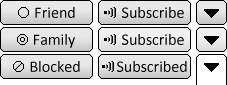
<style>
.page{position:relative;width:227px;height:85px;background:#e8e8e8}
.page>*{position:absolute;margin:0}
.t1{font:16px "Calibri";color:#000000}
</style>
<div class="page">
<p class="t1" style="left:35px;top:7px;width:40px;height:11px">Friend</p>
<p class="t1" style="left:122px;top:7px;width:62px;height:11px">Subscribe</p>
<p class="t1" style="left:34px;top:34px;width:41px;height:14px">Family</p>
<p class="t1" style="left:122px;top:34px;width:62px;height:11px">Subscribe</p>
<p class="t1" style="left:30px;top:61px;width:50px;height:11px">Blocked</p>
<p class="t1" style="left:117px;top:61px;width:70px;height:11px">Subscribed</p>
</div>
